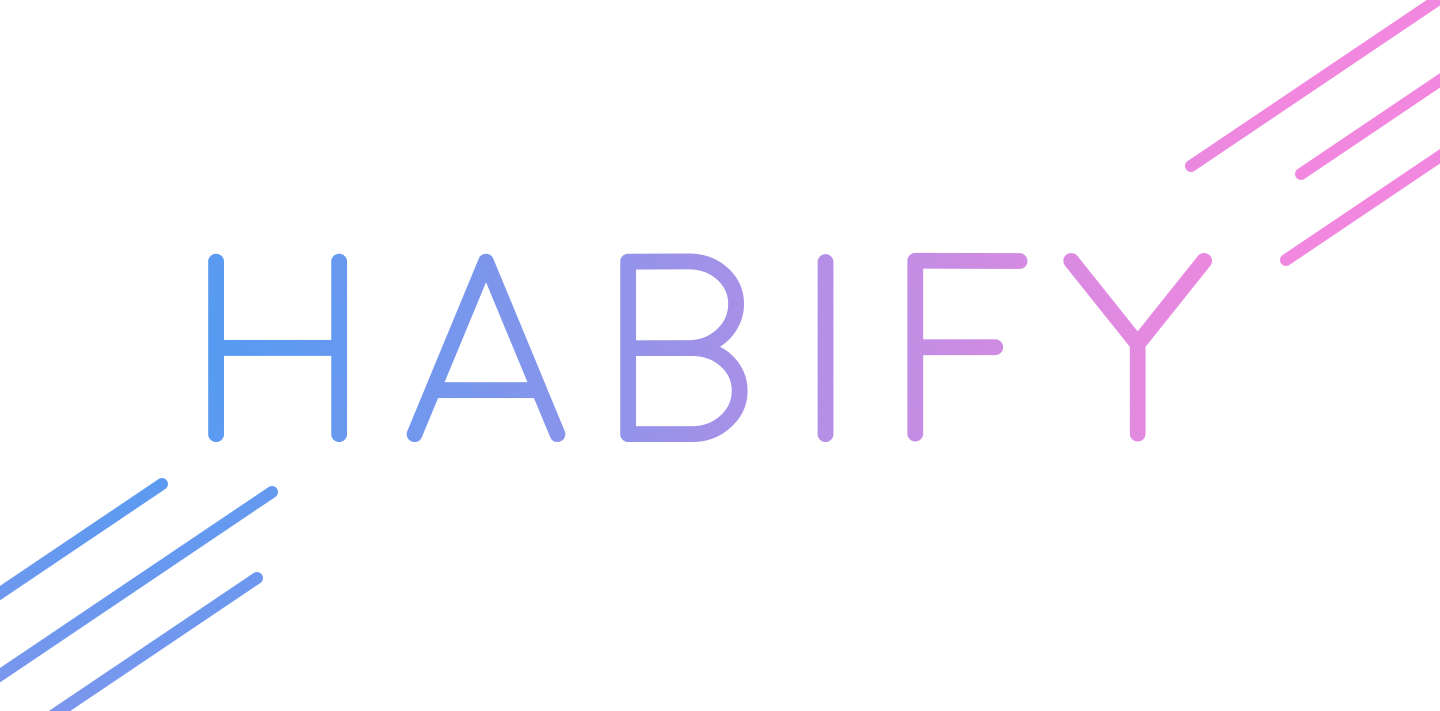
<style>
.page{position:relative;width:1440px;height:711px;background:#ffffff}
.page>*{position:absolute;margin:0}
.t1{font:268.5px "Moon-Light";letter-spacing:0.08em}
</style>
<div class="page">
<p class="t1" style="left:208px;top:252px;width:1004px;height:190px">Habify</p>
</div>
